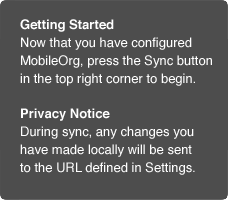
<style>
.page{position:relative;width:228px;height:200px;background:#4d4d4d}
.page>*{position:absolute;margin:0}
.t1{font:13px/18px "Helvetica";color:#ffffff}
.t2{font:13px/18px "Helvetica-Bold";color:#ffffff}
</style>
<div class="page">
<p class="t1" style="left:20px;top:19px;width:192px;height:67px"><span class="t2">Getting Started<br></span>Now that you have configured<br>MobileOrg, press the Sync button<br>in the top right corner to begin.</p>
<p class="t1" style="left:20px;top:108px;width:175px;height:67px"><span class="t2">Privacy Notice<br></span>During sync, any changes you<br>have made locally will be sent<br>to the URL defined in Settings.</p>
</div>
